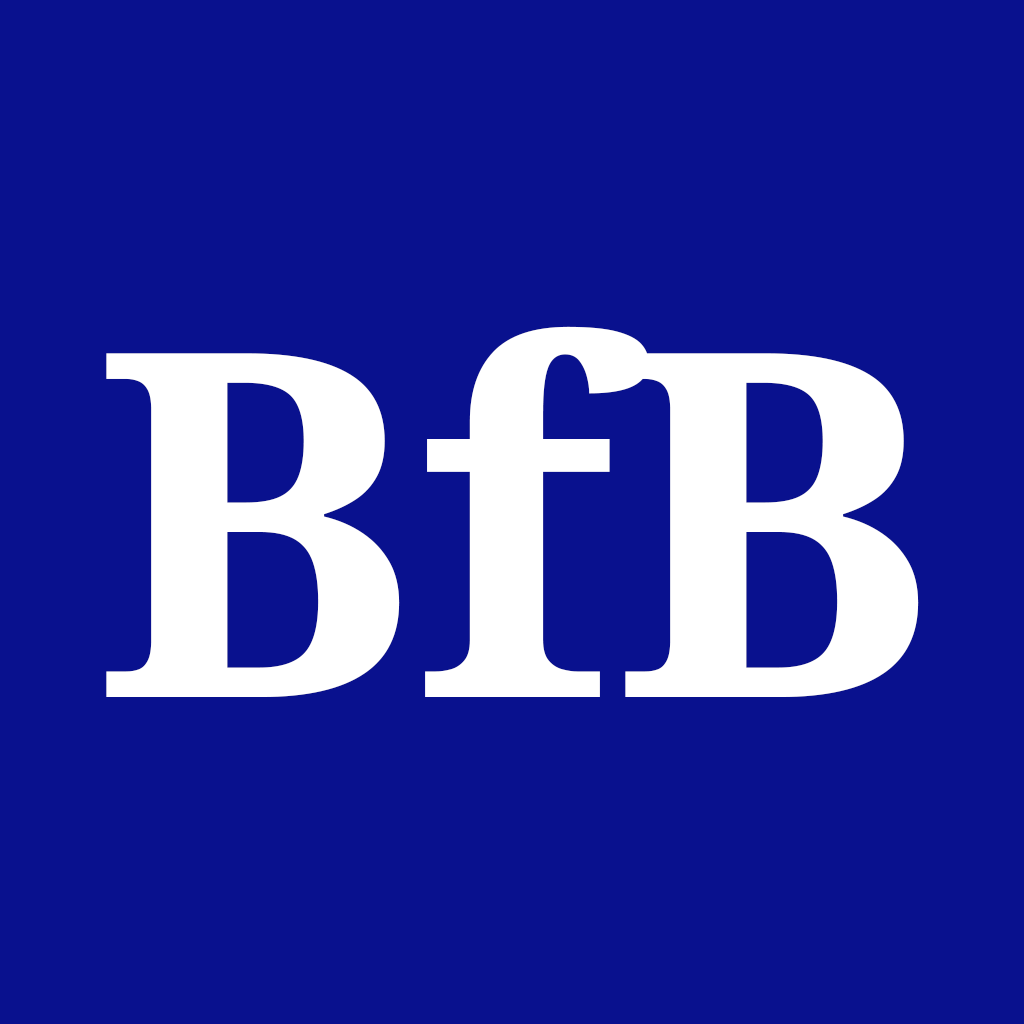
<style>
.page{position:relative;width:1024px;height:1024px;background:#09118e}
.page>*{position:absolute;margin:0}
.t1{font:481.2px "NotoSerif-Bold";color:#ffffff}
</style>
<div class="page">
<p class="t1" style="left:106px;top:326px;width:813px;height:371px">BfB</p>
</div>
